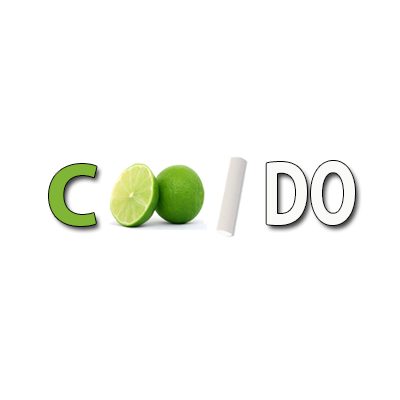
<style>
.page{position:relative;width:400px;height:400px;background:#ffffff}
.page>*{position:absolute;margin:0}
.t1{font:92px "MyriadPro-Bold";color:#fafbf9;scale:0.74 1}
.t2{font:88.3px "MyriadPro-Bold";color:#80b536}
</style>
<div class="page">
<p class="t1" style="left:266px;top:161px;width:89px;height:64px">DO</p>
<p class="t2" style="left:49px;top:164px;width:48px;height:62px">C</p>
</div>
